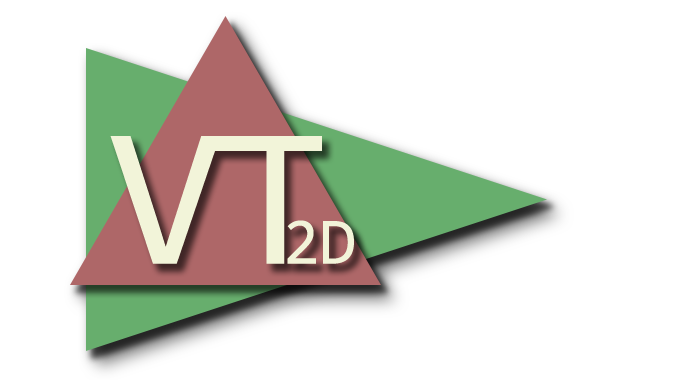
<style>
.page{position:relative;width:675px;height:380px;background:#ffffff}
.page>*{position:absolute;margin:0}
.t1{font:200px "Consolas";color:#f2f4d9}
.t2{font:66.7px "Consolas";color:#f2f4d9}
</style>
<div class="page">
<p class="t1" style="left:110px;top:136px;width:212px;height:128px">VT</p>
<p class="t2" style="left:287px;top:220px;width:67px;height:44px">2D</p>
</div>
